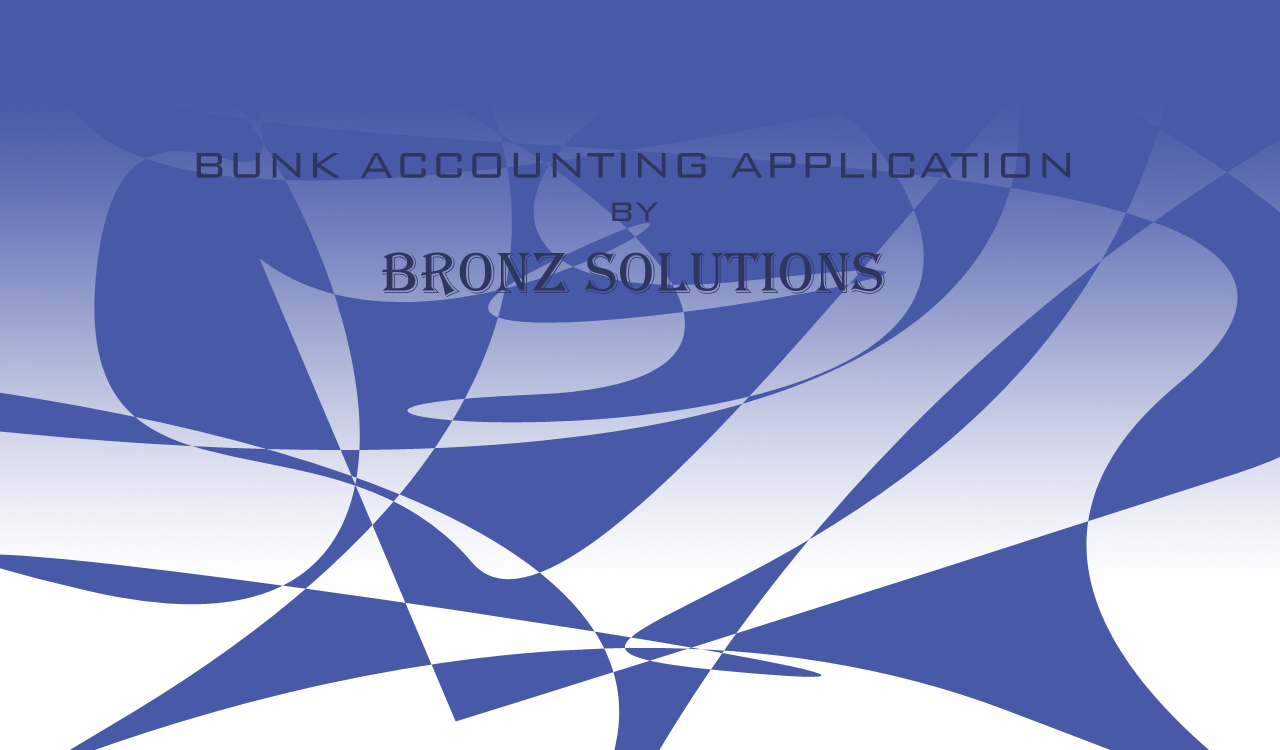
<style>
.page{position:relative;width:1280px;height:750px;background:#4859a8}
.page>*{position:absolute;margin:0}
.t1{font:48px "BankGothicBT-Light";color:#2e3660}
.t2{font:36px "BankGothicBT-Light";color:#2e3660}
.t3{font:60px "Algerian";color:#2e3660}
</style>
<div class="page">
<p class="t1" style="left:196px;top:153px;width:874px;height:145px;text-align:center">BUNK ACCOUNTING APPLICATION<br><span class="t2">BY<br></span><span class="t3">BRONZ SOLUTIONS</span></p>
</div>
